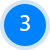
<style>
.page{position:relative;width:50px;height:50px;background:#0082fc}
.page>*{position:absolute;margin:0}
.t1{font:24px "MyriadPro-Regular";color:#ffffff}
</style>
<div class="page">
<p class="t1" style="left:20px;top:15px;width:10px;height:16px">3</p>
</div>
